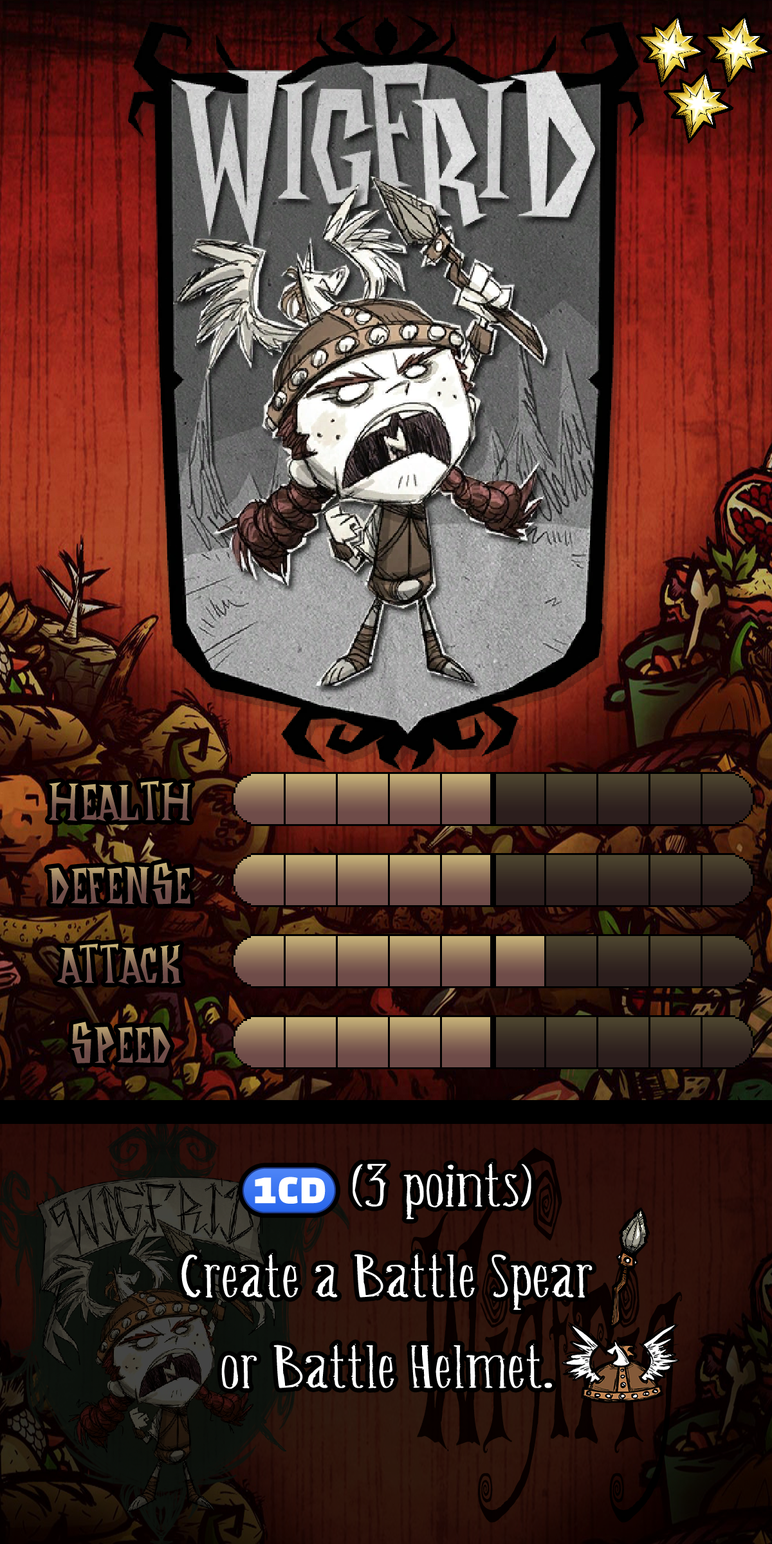
<style>
.page{position:relative;width:772px;height:1544px}
.page>*{position:absolute;margin:0}
.t1{font:96.5px "DontStarveNameFont"}
.t2{font:47px/90.7px "Belisaplumillamanual";color:#ffffff;scale:1.69 1}
.t3{font:47px/90.7px "stoogedings-Regular";letter-spacing:0.303em;color:#ffffff}
</style>
<div class="page">
<p class="t1" style="left:49px;top:781px;width:142px;height:41px">Health</p>
<p class="t1" style="left:48px;top:863px;width:142px;height:42px">Defense</p>
<p class="t1" style="left:57px;top:944px;width:124px;height:40px">Attack</p>
<p class="t1" style="left:71px;top:1022px;width:100px;height:42px">Speed</p>
<p class="t2" style="left:181px;top:1163px;width:412px;height:226px;text-align:center"><span class="t3">(1CD)</span>(3 points) Create a Battle Spear or Battle Helmet.</p>
</div>
